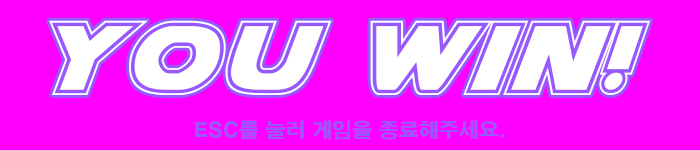
<style>
.page{position:relative;width:700px;height:150px;background:#ff00ff}
.page>*{position:absolute;margin:0}
.t1{font:140px "AirstrikeAcademy";color:#ffffff}
.t2{font:20px "H2gtrE";color:#9759fe}
</style>
<div class="page">
<p class="t1" style="left:49px;top:20px;width:602px;height:75px">YOU WiN!</p>
<p class="t2" style="left:195px;top:120px;width:309px;height:20px">ESC를 눌러 게임을 종료해주세요.</p>
</div>
